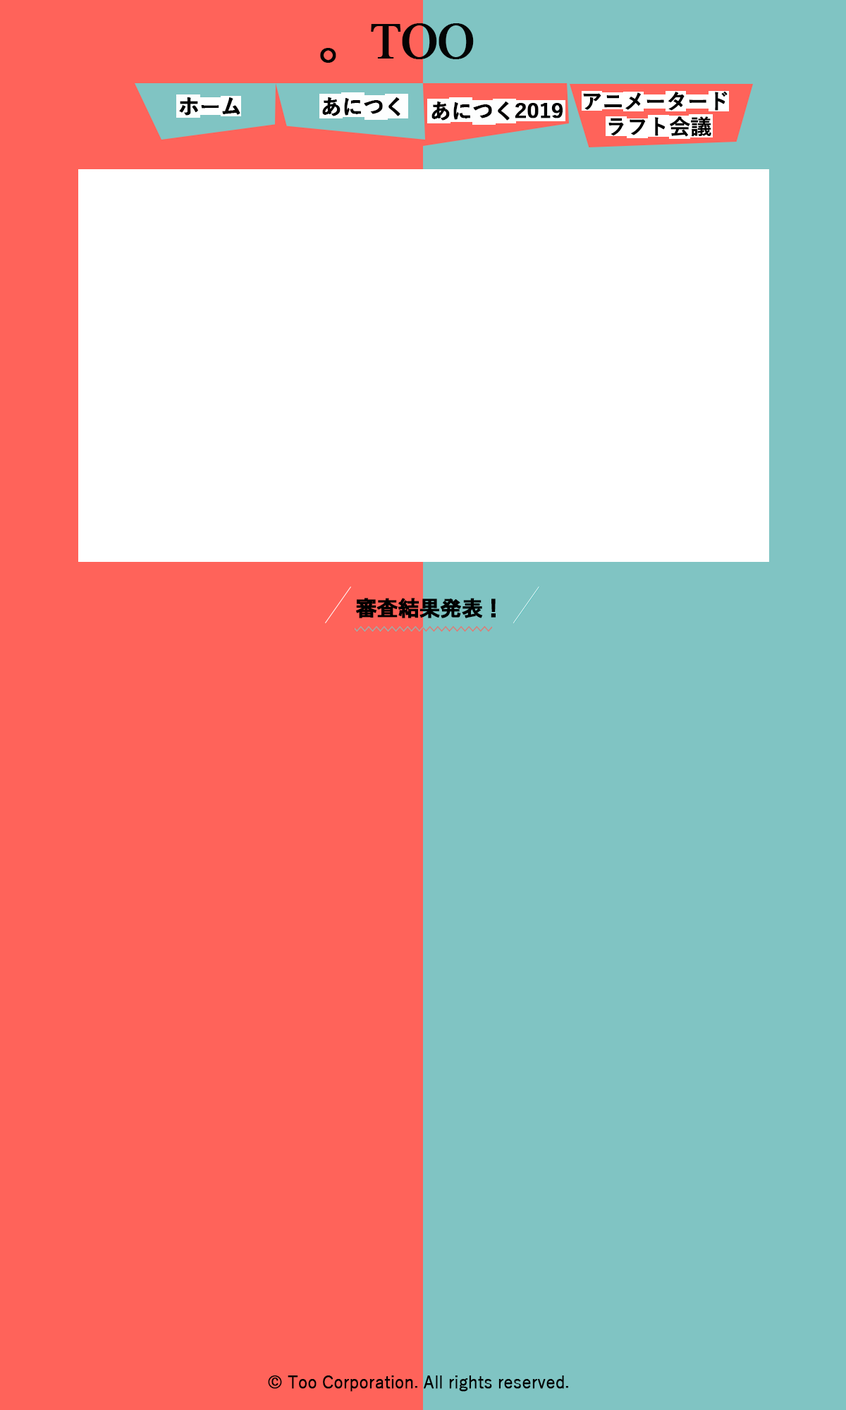
<style>
.page{position:relative;width:846px;height:1410px;background:#ff635a}
.page>*{position:absolute;margin:0}
.t1{font:50.8px "TimesNewRomanPSMT";letter-spacing:-0.025em;color:#040404;font-weight:bold}
.t2{font:50.8px "KozGoPr6N-Regular";letter-spacing:-0.025em;color:#040404;font-weight:bold}
.t3{font:21.1px "YuGothic-Bold";letter-spacing:-0.025em;color:#010101;font-weight:bold}
.t4{font:21.1px/25.4px "YuGothic-Bold";letter-spacing:-0.025em;color:#000000;font-weight:bold}
.t5{font:21.1px "HGPGothicE";letter-spacing:-0.025em;color:#000000;font-weight:bold}
.t6{font:16.9px "YuGothic-Regular";letter-spacing:-0.025em;color:#000000;font-weight:bold}
</style>
<div class="page">
<p class="t1" style="left:320px;top:23px;width:154px;height:40px"><span class="t2">。</span>TOO</p>
<p class="t3" style="left:179px;top:97px;width:61px;height:19px">ホーム</p>
<p class="t3" style="left:322px;top:97px;width:78px;height:19px">あにつく</p>
<p class="t3" style="left:431px;top:102px;width:131px;height:19px">あにつく2019</p>
<p class="t4" style="left:583px;top:91px;width:144px;height:46px">アニメータード<br>    ラフト会議</p>
<p class="t5" style="left:356px;top:598px;width:140px;height:20px">審査結果発表！</p>
<p class="t6" style="left:268px;top:1375px;width:300px;height:16px">© Too Corporation. All rights reserved.</p>
</div>
